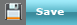
<style>
.page{position:relative;width:77px;height:25px}
.page>*{position:absolute;margin:0}
.t1{font:10.1px "Tahoma-Bold";letter-spacing:0.04em;color:#ffffff;scale:1.1 1}
</style>
<div class="page">
<p class="t1" style="left:36px;top:8px;width:28px;height:7px">Save</p>
</div>
